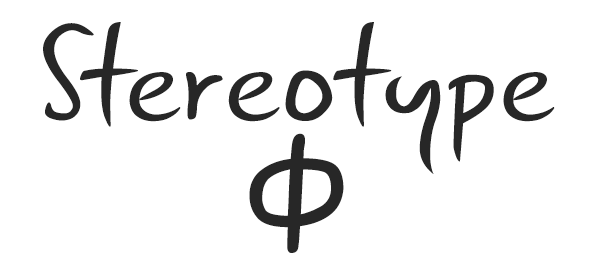
<style>
.page{position:relative;width:600px;height:266px;background:#ffffff}
.page>*{position:absolute;margin:0}
.t1{font:140px/105px "GunnyRewritten";color:#272727;scale:1.1 1}
.t2{font:40px/105px "GunnyRewritten";color:#272727;scale:1.1 1}
.t3{font:180px/105px "GunnyRewritten";color:#272727;scale:1.1 1}
.t4{font:140px/130px "GunnyRewritten";color:#272727;scale:1.1 1}
</style>
<div class="page">
<p class="t1" style="left:43px;top:22px;width:512px;height:231px;text-align:center">Stereotype<span class="t2"><br></span><span class="t3">ф<br></span><span class="t4"></span></p>
</div>
